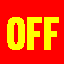
<style>
.page{position:relative;width:64px;height:64px;background:#ff0000}
.page>*{position:absolute;margin:0}
.t1{font:44.9px "BebasNeue-Regular";color:#ffff00;font-weight:bold}
</style>
<div class="page">
<p class="t1" style="left:7px;top:17px;width:52px;height:33px">OFF</p>
</div>
